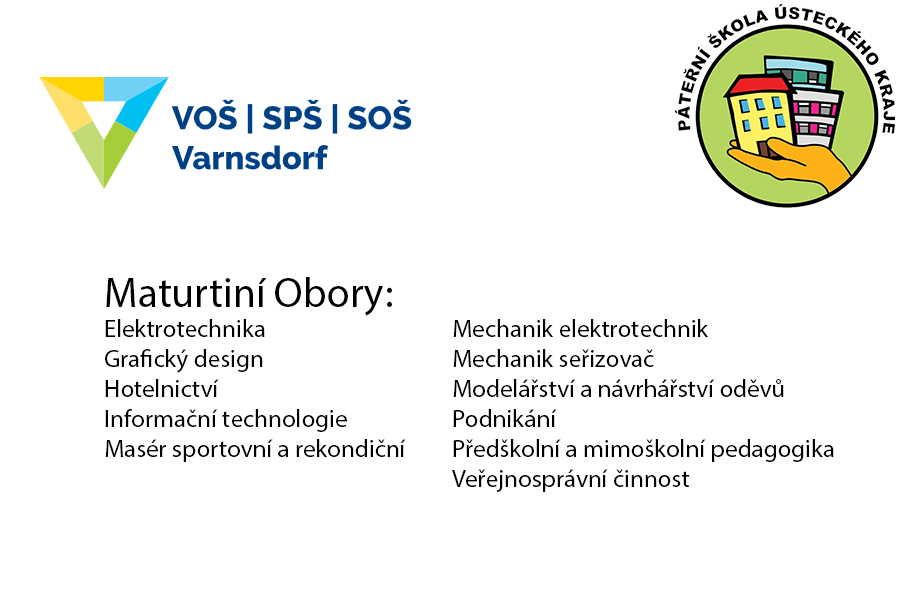
<style>
.page{position:relative;width:900px;height:600px;background:#ffffff}
.page>*{position:absolute;margin:0}
.t1{font:25px "MyriadPro-Regular";color:#000000}
.t2{font:41.7px "MyriadPro-Regular";color:#000000}
</style>
<div class="page">
<p class="t1" style="left:105px;top:277px;width:301px;height:185px"><span class="t2">Maturtiní Obory:<br></span>Elektrotechnika<br>Grafický design <br>Hotelnictví <br>Informační technologie <br>Masér sportovní a rekondiční</p>
<p class="t1" style="left:452px;top:319px;width:382px;height:173px">Mechanik elektrotechnik<br>Mechanik seřizovač<br>Modelářství a návrhářství oděvů<br>Podnikání<br>Předškolní a mimoškolní pedagogika<br>Veřejnosprávní činnost</p>
</div>
